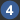
<style>
.page{position:relative;width:20px;height:20px;background:#3b5f97}
.page>*{position:absolute;margin:0}
.t1{font:14px "Arial-BoldMT";letter-spacing:0.025em;color:#fcfdfd}
</style>
<div class="page">
<p class="t1" style="left:6px;top:5px;width:8px;height:10px">4</p>
</div>
